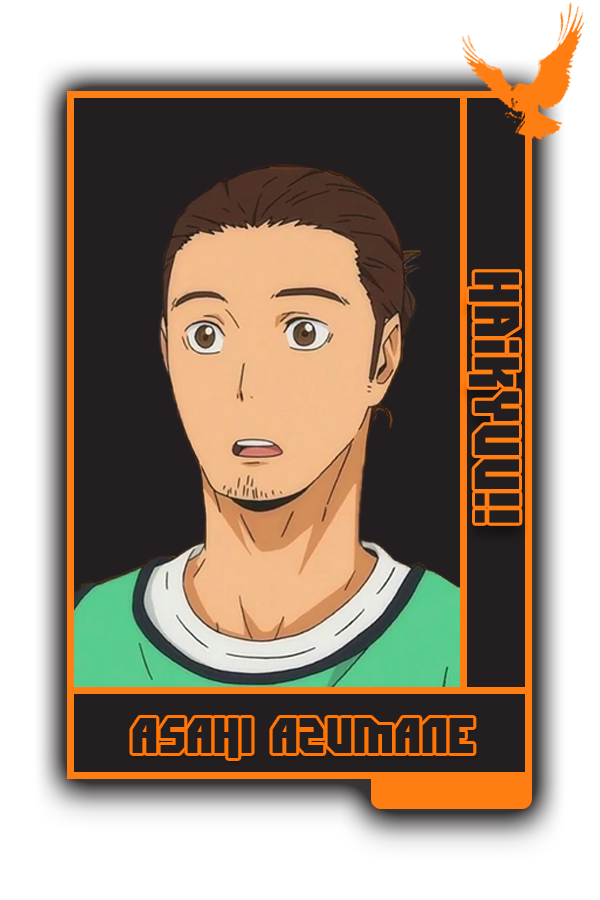
<style>
.page{position:relative;width:600px;height:900px;background:#231e1f}
.page>*{position:absolute;margin:0}
.t1{font:62.9px "Dimitri";color:#231f20}
.t2{font:50.5px "Dimitri";color:#231f20}
</style>
<div class="page">
<p class="t1" style="left:469px;top:272px;width:51px;height:251px;rotate:90deg">Haikyuu!!</p>
<p class="t2" style="left:132px;top:718px;width:342px;height:40px">AsAHI AZUMANE</p>
</div>
